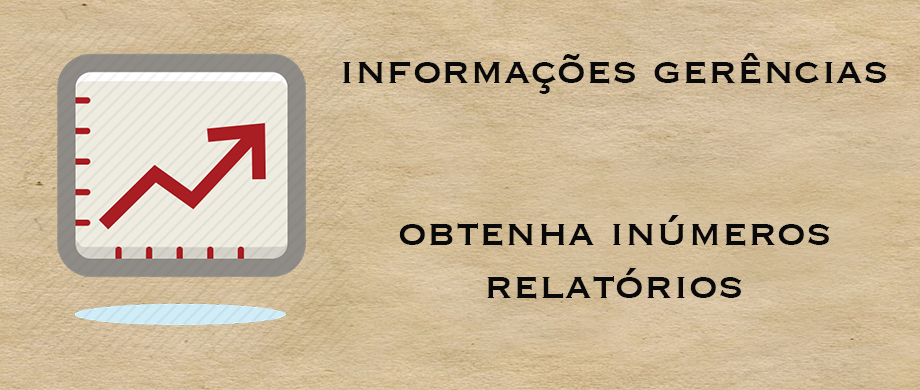
<style>
.page{position:relative;width:920px;height:390px}
.page>*{position:absolute;margin:0}
.t1{font:46.8px "Copperplate";color:#090909}
</style>
<div class="page">
<p class="t1" style="left:343px;top:53px;width:544px;height:41px">informações gerências</p>
<p class="t1" style="left:399px;top:215px;width:431px;height:31px">obtenha inúmeros</p>
<p class="t1" style="left:487px;top:268px;width:255px;height:31px">relatórios</p>
</div>
